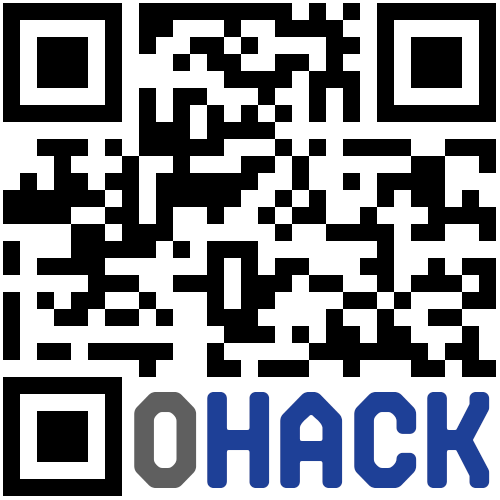
<style>
.page{position:relative;width:500px;height:500px;background:#ffffff}
.page>*{position:absolute;margin:0}
.t1{font:141.2px "Makisupa";color:#1e4097}
.t2{font:141.2px "Makisupa";color:#5f5f5f}
</style>
<div class="page">
<p class="t1" style="left:134px;top:392px;width:356px;height:96px"><span class="t2">o</span>hack</p>
</div>
